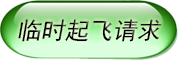
<style>
.page{position:relative;width:178px;height:60px}
.page>*{position:absolute;margin:0}
.t1{font:24px "SimHei";color:#000000;font-style:italic}
</style>
<div class="page">
<p class="t1" style="left:18px;top:19px;width:144px;height:23px">临时起飞请求</p>
</div>
